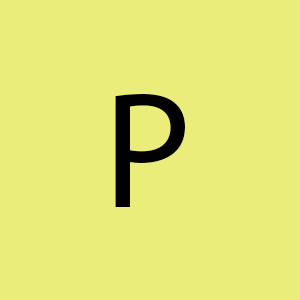
<style>
.page{position:relative;width:300px;height:300px;background:#eaed7a}
.page>*{position:absolute;margin:0}
.t1{font:166.7px "MyriadPro-Regular";color:#000000}
</style>
<div class="page">
<p class="t1" style="left:115px;top:94px;width:70px;height:113px">P</p>
</div>
